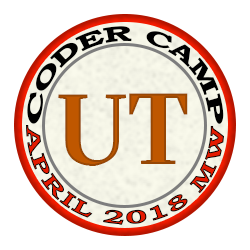
<style>
.page{position:relative;width:250px;height:250px;background:#ffffff}
.page>*{position:absolute;margin:0}
.t1{font:21.2px "BookmanOldStyle-Bold";color:#000000}
.t2{font:100px "GTSectraFine-Bold";color:#bf5700}
.t3{font:19.7px "BookmanOldStyle-Bold"}
</style>
<div class="page">
<p class="t1" style="left:27px;top:26px;width:197px;height:98px">CODER CAMP</p>
<p class="t2" style="left:58px;top:93px;width:130px;height:73px">UT</p>
<p class="t3" style="left:26px;top:125px;width:199px;height:100px">APRIL 2018 MW</p>
</div>
